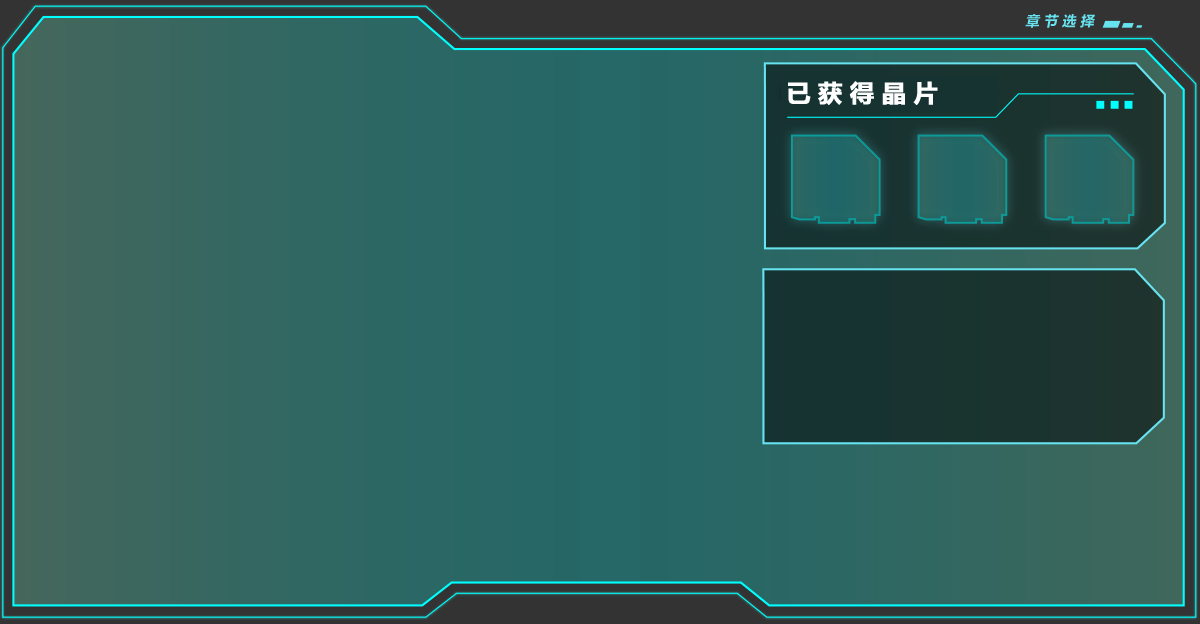
<style>
.page{position:relative;width:1200px;height:624px}
.page>*{position:absolute;margin:0}
.t1{font:14px "MicrosoftYaHei-Bold";letter-spacing:0.3em;color:#67e3f0;font-style:italic}
.t2{font:24px "MicrosoftYaHei-Bold";letter-spacing:0.3em;color:#ffffff;font-weight:bold}
</style>
<div class="page">
<p class="t1" style="left:1025px;top:14px;width:70px;height:14px">章节选择</p>
<p class="t2" style="left:788px;top:81px;width:150px;height:24px">已获得晶片</p>
</div>
